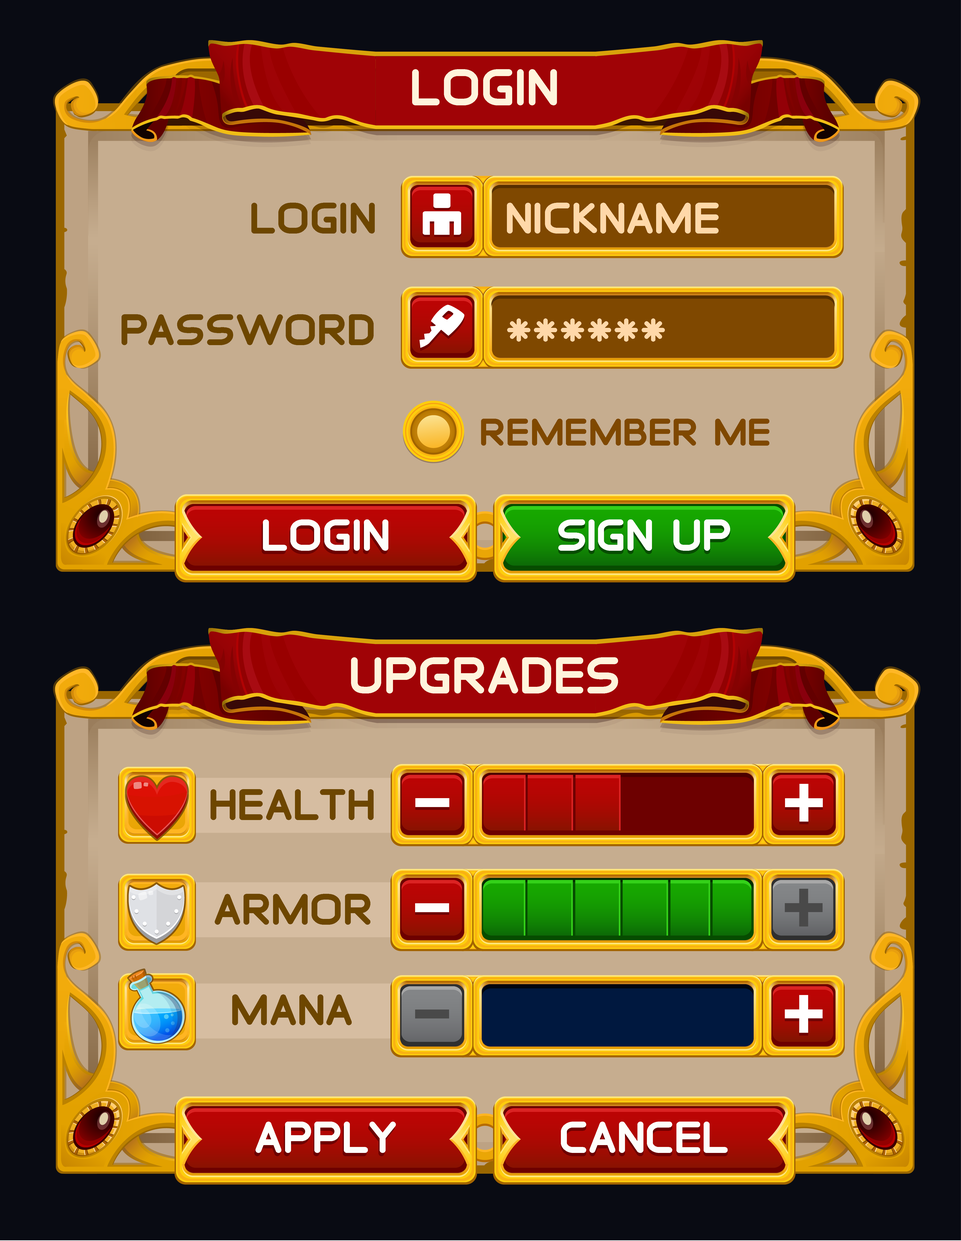
<style>
.page{position:relative;width:961px;height:1241px;background:#090b13}
.page>*{position:absolute;margin:0}
.t1{font:45.2px "SaranaiGame-Bold";color:#fff4dc}
.t2{font:38.4px "SaranaiGame-Bold";color:#6d4600}
.t3{font:38.4px "SaranaiGame-Bold";color:#ffd8a9}
.t4{font:33.6px "SaranaiGame-Bold";color:#7f4800}
.t5{font:39.2px "SaranaiGame-Bold";color:#fdfefb}
.t6{font:39.2px "SaranaiGame-Bold"}
</style>
<div class="page">
<p class="t1" style="left:412px;top:69px;width:145px;height:36px">login</p>
<p class="t2" style="left:251px;top:203px;width:124px;height:31px">login</p>
<p class="t3" style="left:507px;top:203px;width:211px;height:31px">nickname</p>
<p class="t2" style="left:122px;top:314px;width:252px;height:31px">password</p>
<p class="t3" style="left:507px;top:318px;width:158px;height:24px">******</p>
<p class="t4" style="left:481px;top:419px;width:288px;height:27px">remember me</p>
<p class="t5" style="left:263px;top:519px;width:125px;height:32px">login</p>
<p class="t5" style="left:558px;top:519px;width:172px;height:32px">sign up</p>
<p class="t6" style="left:262px;top:523px;width:125px;height:31px">login</p>
<p class="t5" style="left:558px;top:523px;width:172px;height:31px">sign up</p>
<p class="t1" style="left:351px;top:657px;width:267px;height:37px">upgrades</p>
<p class="t2" style="left:211px;top:789px;width:163px;height:31px">health</p>
<p class="t2" style="left:215px;top:894px;width:155px;height:31px">armor</p>
<p class="t2" style="left:232px;top:994px;width:120px;height:31px">mana</p>
<p class="t5" style="left:255px;top:1122px;width:141px;height:31px">apply</p>
<p class="t5" style="left:561px;top:1122px;width:166px;height:31px">cancel</p>
<p class="t6" style="left:254px;top:1125px;width:141px;height:31px">apply</p>
<p class="t6" style="left:561px;top:1125px;width:166px;height:31px">cancel</p>
</div>
